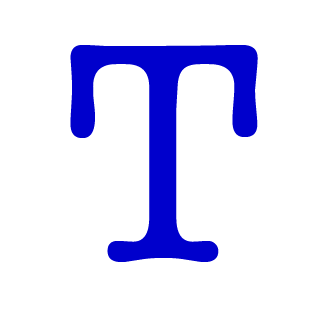
<style>
.page{position:relative;width:320px;height:320px;background:#ffffff}
.page>*{position:absolute;margin:0}
.t1{font:320px "AmericanTypewriter";color:#0000cc}
</style>
<div class="page">
<p class="t1" style="left:70px;top:45px;width:188px;height:217px">T</p>
</div>
